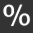
<style>
.page{position:relative;width:33px;height:33px;background:#333333}
.page>*{position:absolute;margin:0}
.t1{font:28.3px "Merriweather-Regular";color:#ffffff}
</style>
<div class="page">
<p class="t1" style="left:3px;top:4px;width:27px;height:22px">%</p>
</div>
